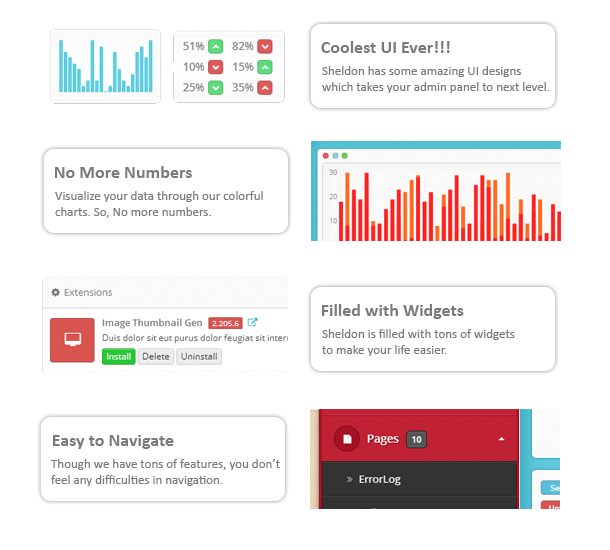
<style>
.page{position:relative;width:610px;height:550px;background:#ffffff}
.page>*{position:absolute;margin:0}
.t1{font:18px "Calibri-Bold";color:#7a7a7a}
.t2{font:13px "Calibri";color:#7a7a7a}
</style>
<div class="page">
<p class="t1" style="left:321px;top:41px;width:129px;height:12px">Coolest UI Ever!!!</p>
<p class="t2" style="left:322px;top:66px;width:228px;height:27px">Sheldon has some amazing UI designs <br>which takes your admin panel to next level.</p>
<p class="t1" style="left:55px;top:166px;width:137px;height:12px">No More Numbers</p>
<p class="t2" style="left:55px;top:191px;width:208px;height:27px">Visualize your data through our colorful<br>charts. So, No more numbers.</p>
<p class="t1" style="left:322px;top:304px;width:142px;height:15px">Filled with Widgets</p>
<p class="t2" style="left:322px;top:329px;width:193px;height:27px">Sheldon is filled with tons of widgets<br>to make your life easier.</p>
<p class="t1" style="left:53px;top:435px;width:121px;height:14px">Easy to Navigate</p>
<p class="t2" style="left:51px;top:459px;width:229px;height:27px">Though we have tons of features, you don’t<br>feel any difficulties in navigation.</p>
</div>
